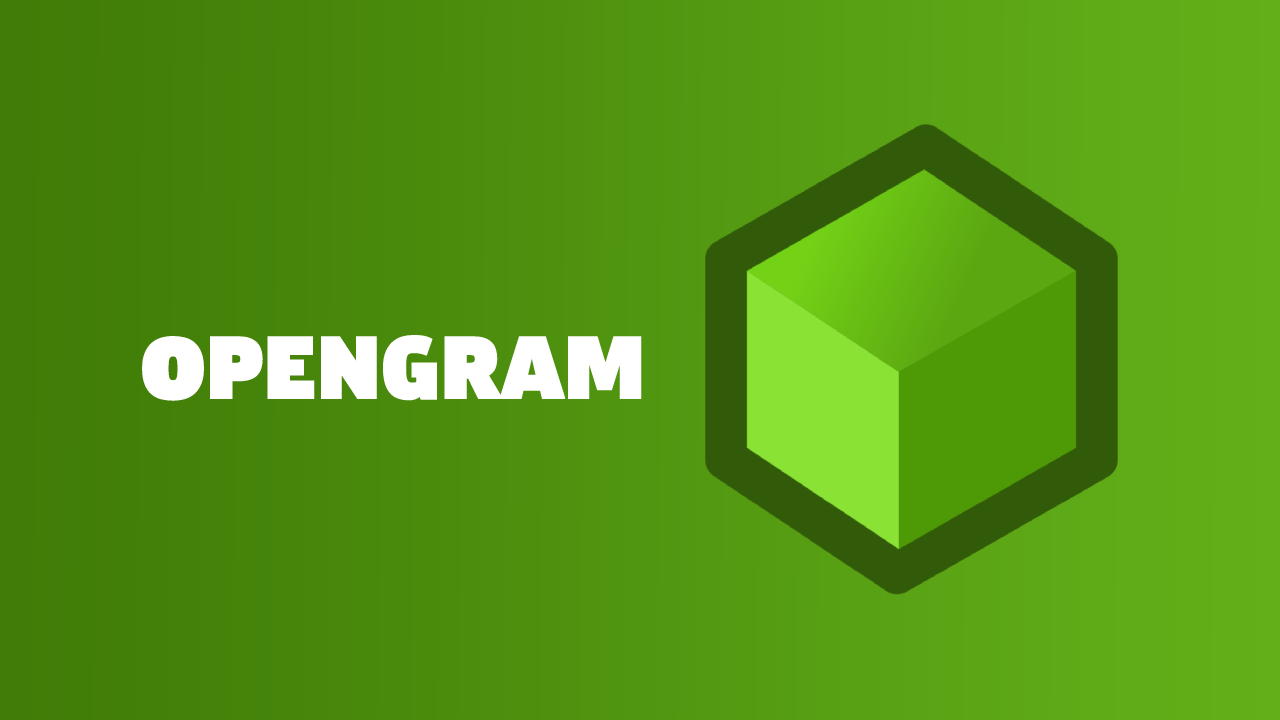
<style>
.page{position:relative;width:1280px;height:720px}
.page>*{position:absolute;margin:0}
.t1{font:97px "Bulo-UltraBlack";color:#ffffff}
.t2{font:120px "Bulo-UltraBlack";color:#ffffff}
</style>
<div class="page">
<p class="t1" style="left:142px;top:334px;width:500px;height:67px"><span class="t2">o</span>PENGRAM</p>
</div>
